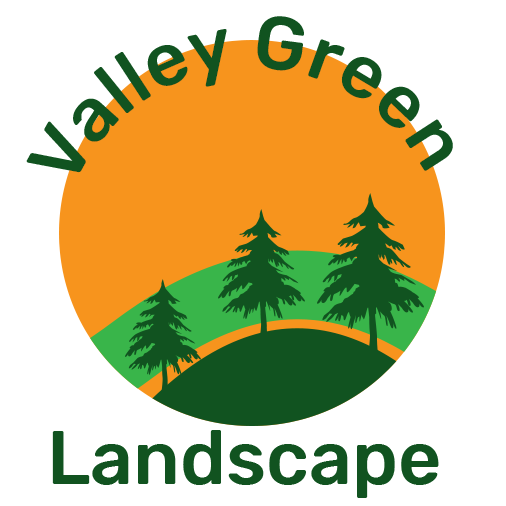
<style>
.page{position:relative;width:506px;height:506px;background:#ffffff}
.page>*{position:absolute;margin:0}
.t1{font:75px "Rubik-Medium";color:#115320}
</style>
<div class="page">
<p class="t1" style="left:26px;top:16px;width:427px;height:157px;rotate:45deg">Valley Green</p>
<p class="t1" style="left:52px;top:430px;width:387px;height:68px">Landscape</p>
</div>
